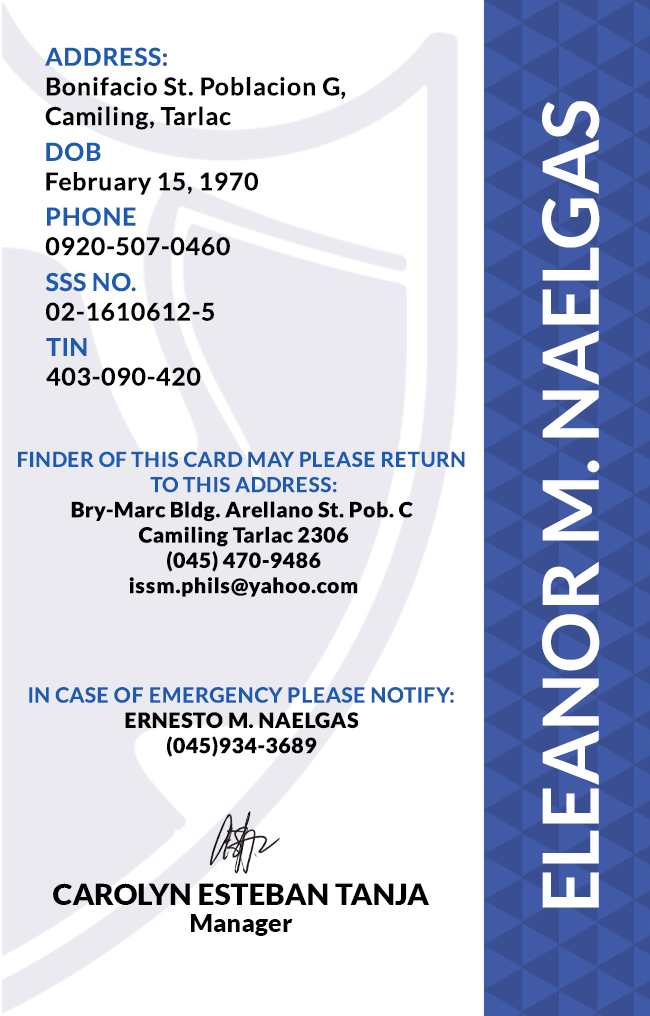
<style>
.page{position:relative;width:650px;height:1016px;background:#ffffff}
.page>*{position:absolute;margin:0}
.t1{font:24.7px/29.6px "Lato-Bold";letter-spacing:0.025em;color:#000000}
.t2{font:24.7px/29.6px "Lato-Bold";letter-spacing:0.025em;color:#1c5bb0}
.t3{font:77.6px "Lato-Bold";color:#ffffff}
.t4{font:21.1px "Lato-Black";letter-spacing:0.025em}
.t5{font:20.5px/25.3px "Lato-Bold";letter-spacing:0.025em;text-transform:uppercase}
.t6{font:21.1px/25.3px "Lato-Bold";letter-spacing:0.025em;color:#1c5bb0}
.t7{font:21.1px "Lato-Black";letter-spacing:0.025em;color:#000000}
.t8{font:29.5px "Lato-Black";color:#000000}
.t9{font:25px "Lato-Black";color:#000000}
</style>
<div class="page">
<p class="t1" style="left:45px;top:47px;width:301px;height:83px"><span class="t2">ADDRESS:<br></span>Bonifacio St. Poblacion G,<br>Camiling, Tarlac</p>
<p class="t3" style="left:542px;top:101px;width:58px;height:807px;rotate:-90deg">ELEANOR M. NAELGAS</p>
<p class="t1" style="left:46px;top:142px;width:212px;height:53px"><span class="t2">DOB<br></span>February 15, 1970</p>
<p class="t1" style="left:45px;top:207px;width:185px;height:49px"><span class="t2">PHONE <br></span>0920-507-0460</p>
<p class="t1" style="left:45px;top:272px;width:169px;height:49px"><span class="t2">SSS NO.<br></span>02-1610612-5</p>
<p class="t1" style="left:46px;top:338px;width:155px;height:48px"><span class="t2">TIN<br></span>403-090-420</p>
<p class="t4" style="left:18px;top:451px;width:447px;height:146px;text-align:center"><span class="t5">Finder of this card may please return <br>to this address:<br></span>Bry-Marc Bldg. Arellano St. Pob. C <br>Camiling Tarlac 2306<br>(045) 470-9486<br>issm.phils@yahoo.com</p>
<p class="t6" style="left:29px;top:687px;width:425px;height:70px;text-align:center">IN CASE OF EMERGENCY PLEASE NOTIFY:<br><span class="t7">ERNESTO M. NAELGAS<br>(045)934-3689</span></p>
<p class="t8" style="left:53px;top:883px;width:376px;height:22px">CAROLYN ESTEBAN TANJA</p>
<p class="t9" style="left:191px;top:914px;width:102px;height:22px">Manager</p>
</div>
